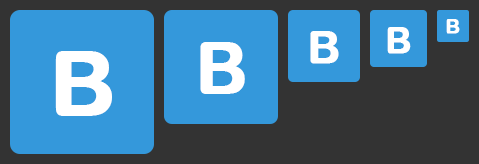
<style>
.page{position:relative;width:479px;height:164px;background:#3498db}
.page>*{position:absolute;margin:0}
.t1{font:35.6px "ArialRoundedMTBold";letter-spacing:-0.04em;color:#ffffff;font-weight:bold}
.t2{font:20px "ArialRoundedMTBold";letter-spacing:-0.04em;color:#ffffff;font-weight:bold}
.t3{font:45px "ArialRoundedMTBold";letter-spacing:-0.04em;color:#ffffff;font-weight:bold}
.t4{font:90px "ArialRoundedMTBold";letter-spacing:-0.04em;color:#ffffff;font-weight:bold}
.t5{font:71.2px "ArialRoundedMTBold";letter-spacing:-0.04em;color:#ffffff;font-weight:bold}
</style>
<div class="page">
<p class="t1" style="left:387px;top:27px;width:24px;height:27px">B</p>
<p class="t2" style="left:446px;top:19px;width:14px;height:15px">B</p>
<p class="t3" style="left:310px;top:31px;width:29px;height:33px">B</p>
<p class="t4" style="left:55px;top:51px;width:57px;height:65px">B</p>
<p class="t5" style="left:200px;top:42px;width:45px;height:52px">B</p>
</div>
